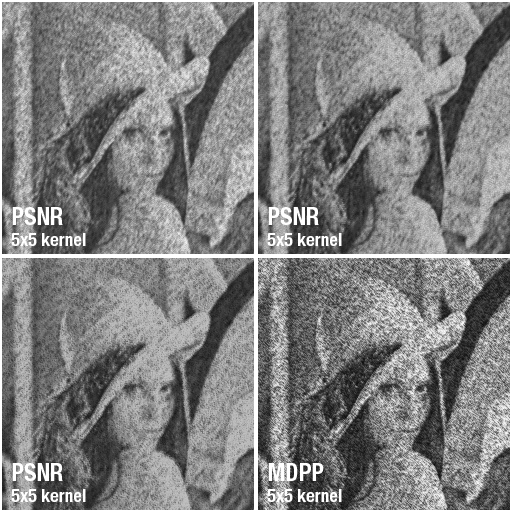
<style>
.page{position:relative;width:512px;height:512px}
.page>*{position:absolute;margin:0}
.t1{font:18px "HelveticaNeueLTPro-BdCn";color:#ffffff}
.t2{font:24px "HelveticaNeueLTPro-BdCn";color:#ffffff}
</style>
<div class="page">
<p class="t1" style="left:11px;top:207px;width:75px;height:39px;text-align:justify"><span class="t2">PSNR<br></span>5x5 kernel</p>
<p class="t1" style="left:267px;top:207px;width:75px;height:39px;text-align:justify"><span class="t2">PSNR<br></span>5x5 kernel</p>
<p class="t1" style="left:11px;top:463px;width:75px;height:39px;text-align:justify"><span class="t2">PSNR<br></span>5x5 kernel</p>
<p class="t1" style="left:267px;top:463px;width:75px;height:39px;text-align:justify"><span class="t2">MDPP<br></span>5x5 kernel</p>
</div>
